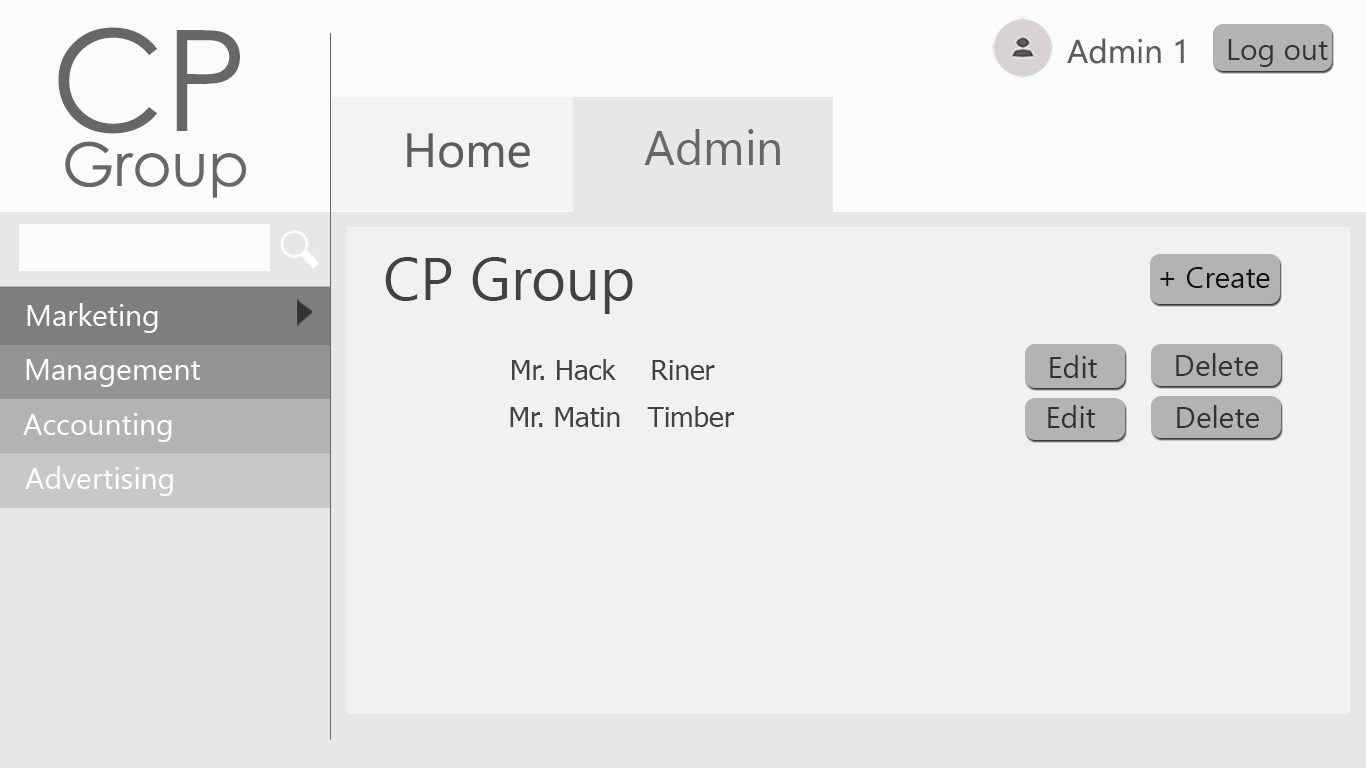
<style>
.page{position:relative;width:1366px;height:768px;background:#f3f0f0}
.page>*{position:absolute;margin:0}
.t1{font:140px "CenturyGothic";color:#676767}
.t2{font:90px "CenturyGothic";color:#676767}
.t3{font:33px "SegoeUI";color:#5d5c5c}
.t4{font:30px "SegoeUI";color:#353434}
.t5{font:48px "SegoeUI";color:#5d5c5c}
.t6{font:48px "SegoeUI";color:#676767}
.t7{font:60px "CenturyGothic";color:#676767}
.t8{font:60px "SegoeUI";color:#434141}
.t9{font:30px "SegoeUI";color:#131212}
.t10{font:30px "SegoeUI";color:#fffefe}
.t11{font:30px "SegoeUI";color:#333131}
.t12{font:30px "SegoeUI";color:#ffffff}
.t13{font:28px "Tahoma";color:#434141}
</style>
<div class="page">
<p class="t1" style="left:58px;top:27px;width:182px;height:107px"><span class="t2"><br></span>CP</p>
<p class="t3" style="left:1067px;top:38px;width:117px;height:26px">Admin 1</p>
<p class="t4" style="left:1228px;top:39px;width:100px;height:28px">Log out</p>
<p class="t5" style="left:407px;top:133px;width:123px;height:35px">Home</p>
<p class="t6" style="left:644px;top:129px;width:136px;height:36px">Admin</p>
<p class="t7" style="left:65px;top:141px;width:181px;height:57px">Group</p>
<p class="t8" style="left:385px;top:257px;width:248px;height:57px">CP Group</p>
<p class="t9" style="left:1160px;top:267px;width:110px;height:21px">+ Create</p>
<p class="t10" style="left:27px;top:303px;width:131px;height:30px">Marketing</p>
<p class="t11" style="left:1176px;top:353px;width:82px;height:23px">Delete</p>
<p class="t12" style="left:26px;top:359px;width:174px;height:28px">Management</p>
<p class="t13" style="left:512px;top:359px;width:203px;height:21px">Mr. Hack    Riner</p>
<p class="t11" style="left:1050px;top:355px;width:47px;height:23px">Edit</p>
<p class="t12" style="left:23px;top:413px;width:149px;height:29px">Accounting</p>
<p class="t13" style="left:510px;top:406px;width:224px;height:21px">Mr. Matin   Timber</p>
<p class="t11" style="left:1048px;top:405px;width:47px;height:23px">Edit</p>
<p class="t11" style="left:1177px;top:405px;width:82px;height:23px">Delete</p>
<p class="t10" style="left:25px;top:466px;width:148px;height:30px">Advertising</p>
</div>
